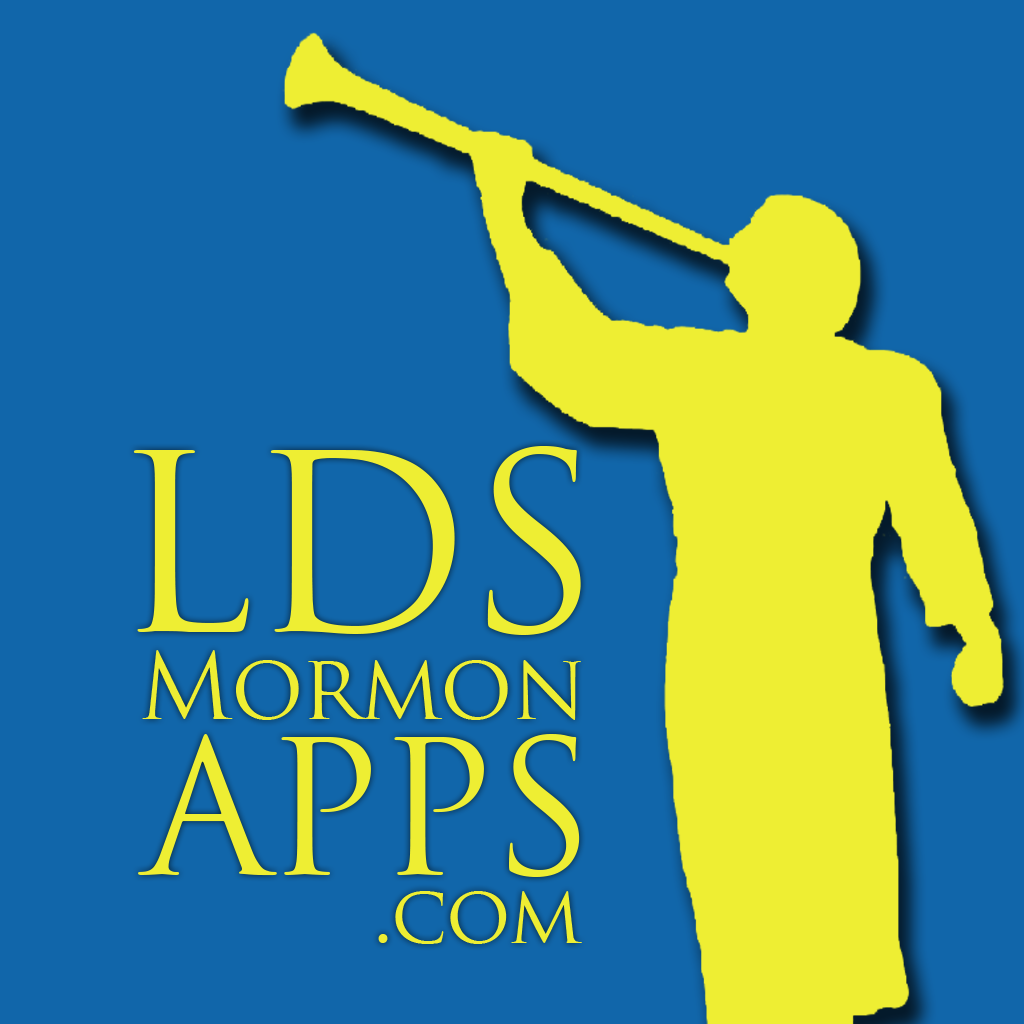
<style>
.page{position:relative;width:1024px;height:1024px;background:#1166aa}
.page>*{position:absolute;margin:0}
.t1{font:240.7px "TrajanPro-Regular";letter-spacing:-0.025em;color:#eeee33}
.t2{font:90px "TrajanPro-Regular";letter-spacing:-0.025em;color:#eeee33}
.t3{font:181.7px "TrajanPro-Regular";letter-spacing:-0.025em;color:#eeee33}
.t4{font:80px "TrajanPro-Regular";letter-spacing:-0.025em;color:#eeee33}
</style>
<div class="page">
<p class="t1" style="left:133px;top:446px;width:448px;height:189px">LDS</p>
<p class="t2" style="left:142px;top:650px;width:439px;height:70px">Mormon</p>
<p class="t3" style="left:138px;top:734px;width:442px;height:143px">APPS</p>
<p class="t4" style="left:378px;top:891px;width:204px;height:53px">.com</p>
</div>
